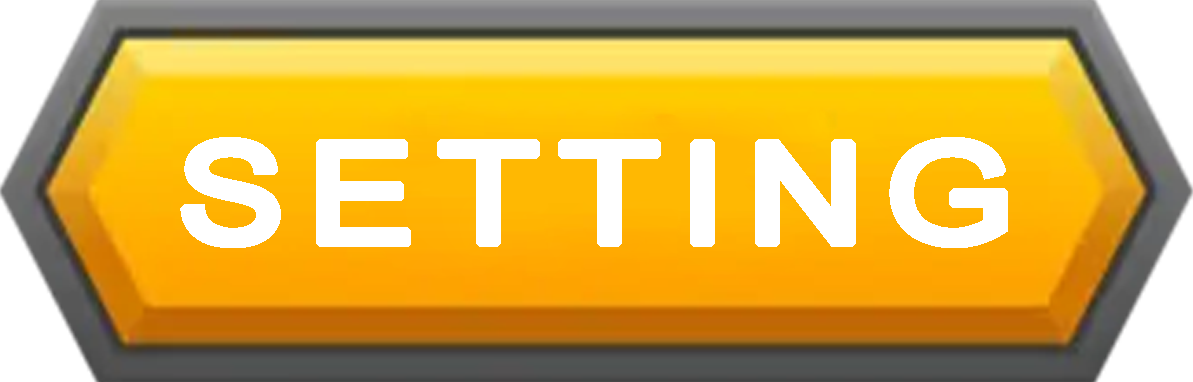
<style>
.page{position:relative;width:1193px;height:382px}
.page>*{position:absolute;margin:0}
.t1{font:139.2px "ArialMT";letter-spacing:0.1em;color:#ffffff;text-transform:uppercase;font-weight:bold;scale:1.18 1}
</style>
<div class="page">
<p class="t1" style="left:180px;top:137px;width:828px;height:111px">setting</p>
</div>
